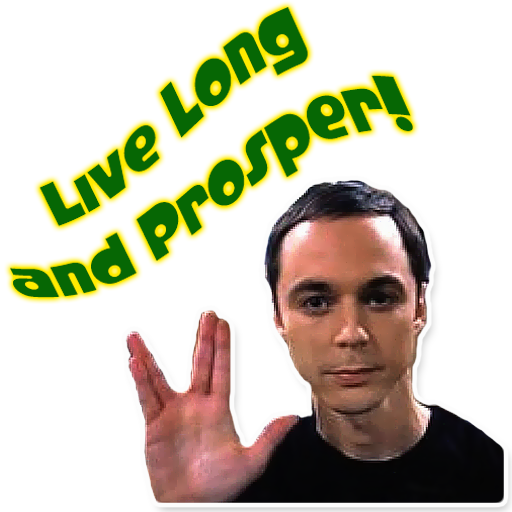
<style>
.page{position:relative;width:512px;height:512px;background:#ffffff}
.page>*{position:absolute;margin:0}
.t1{font:70.8px "CrystalRadioKit-Regular";color:#066704}
</style>
<div class="page">
<p class="t1" style="left:10px;top:7px;width:403px;height:291px;text-align:center;rotate:-25deg">Live Long<br>and Prosper!</p>
</div>
